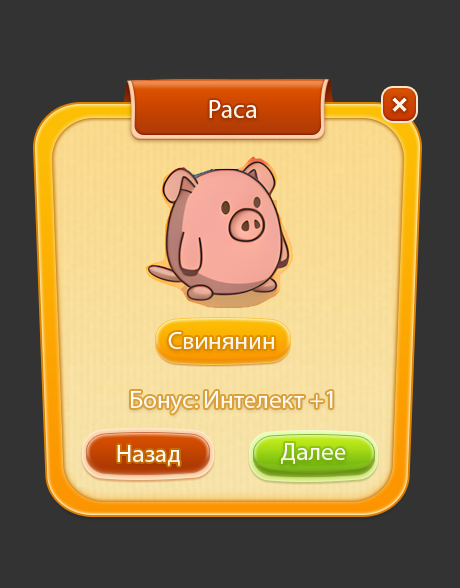
<style>
.page{position:relative;width:460px;height:588px;background:#333333}
.page>*{position:absolute;margin:0}
.t1{font:26px "MyriadPro-Regular";color:#fdf6e8}
.t2{font:25px "MyriadPro-Regular";color:#fdf6e8}
.t3{font:25px "MyriadPro-Regular";color:#ffffff}
</style>
<div class="page">
<p class="t1" style="left:209px;top:100px;width:48px;height:18px">Раса</p>
<p class="t2" style="left:168px;top:332px;width:106px;height:17px">Свинянин</p>
<p class="t3" style="left:131px;top:391px;width:202px;height:23px">Бонус: Интелект +1</p>
<p class="t3" style="left:281px;top:443px;width:65px;height:21px">Далее</p>
</div>
